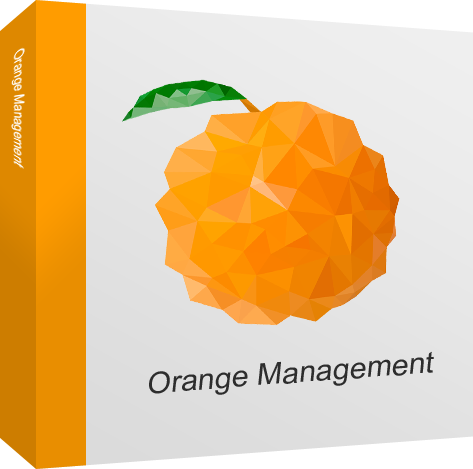
<style>
.page{position:relative;width:473px;height:469px}
.page>*{position:absolute;margin:0}
.t1{font:30.1px "ArialMT";color:#2d2d2d}
</style>
<div class="page">
<p class="t1" style="left:149px;top:351px;width:285px;height:44px;rotate:-4deg">Orange Management</p>
</div>
